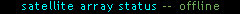
<style>
.page{position:relative;width:240px;height:14px;background:#000000}
.page>*{position:absolute;margin:0}
.t1{font:12px "TrebuchetMS";letter-spacing:0.09em;color:#00ffff}
.t2{font:12px "TrebuchetMS";letter-spacing:0.09em;color:#6baa56}
</style>
<div class="page">
<p class="t1" style="left:22px;top:1px;width:197px;height:11px">satellite array status <span class="t2">-- offline</span></p>
</div>
